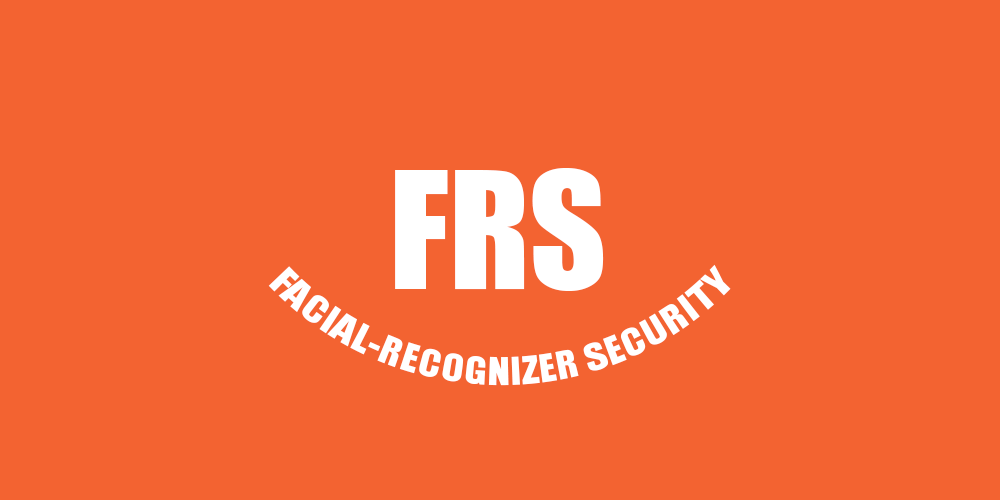
<style>
.page{position:relative;width:1000px;height:500px;background:#f36331}
.page>*{position:absolute;margin:0}
.t1{font:150px "Impact";color:#ffffff}
.t2{font:36px "Impact";color:#ffffff}
</style>
<div class="page">
<p class="t1" style="left:395px;top:168px;width:209px;height:123px">FRS</p>
<p class="t2" style="left:268px;top:264px;width:463px;height:122px;text-align:center">FACIAL-RECOGNIZER SECURITY</p>
</div>
